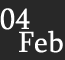
<style>
.page{position:relative;width:65px;height:60px;background:#282828}
.page>*{position:absolute;margin:0}
.t1{font:30px "Sylfaen";color:#ffffff}
</style>
<div class="page">
<p class="t1" style="left:0px;top:8px;width:30px;height:22px">04</p>
<p class="t1" style="left:19px;top:30px;width:44px;height:23px">Feb</p>
</div>
